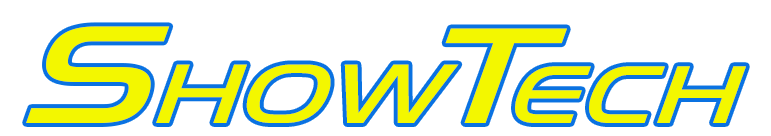
<style>
.page{position:relative;width:771px;height:136px;background:#ffffff}
.page>*{position:absolute;margin:0}
.t1{font:84px "SnasmW00-BookItalic";letter-spacing:0.06em;color:#f3f700;scale:1.11 1}
.t2{font:142.7px "SnasmW00-BookItalic";letter-spacing:0.06em;color:#f3f700;scale:1.11 1}
.t3{font:86.7px "SnasmW00-BookItalic";letter-spacing:0.06em;color:#f3f700;scale:1.1 1}
.t4{font:86.7px "SnasmW00-BookItalic";letter-spacing:0.02em;color:#f3f700;scale:1.1 1}
.t5{font:86.7px "SnasmW00-BookItalic";letter-spacing:-0.26em;color:#f3f700;scale:1.1 1}
.t6{font:140px "SnasmW00-BookItalic";letter-spacing:-0.2em;color:#f3f700;scale:1.11 1}
</style>
<div class="page">
<p class="t1" style="left:26px;top:26px;width:720px;height:97px"><span class="t2">S</span><span class="t3">H</span><span class="t4">O</span><span class="t5">W</span><span class="t6">T</span>ECH</p>
</div>
